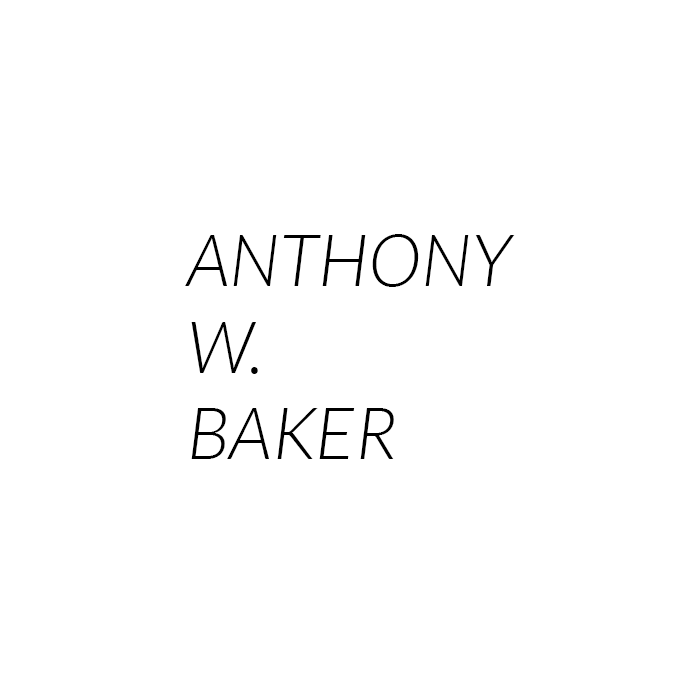
<style>
.page{position:relative;width:700px;height:700px;background:#ffffff}
.page>*{position:absolute;margin:0}
.t1{font:72px "Lato-LightItalic";color:#000000}
</style>
<div class="page">
<p class="t1" style="left:185px;top:234px;width:330px;height:225px">ANTHONY <br>W. <br>BAKER</p>
</div>
